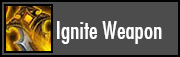
<style>
.page{position:relative;width:180px;height:57px;background:#4c4c4c}
.page>*{position:absolute;margin:0}
.t1{font:24px "FuturaCondensed";color:#ffffff}
</style>
<div class="page">
<p class="t1" style="left:57px;top:21px;width:105px;height:23px">Ignite Weapon</p>
</div>
